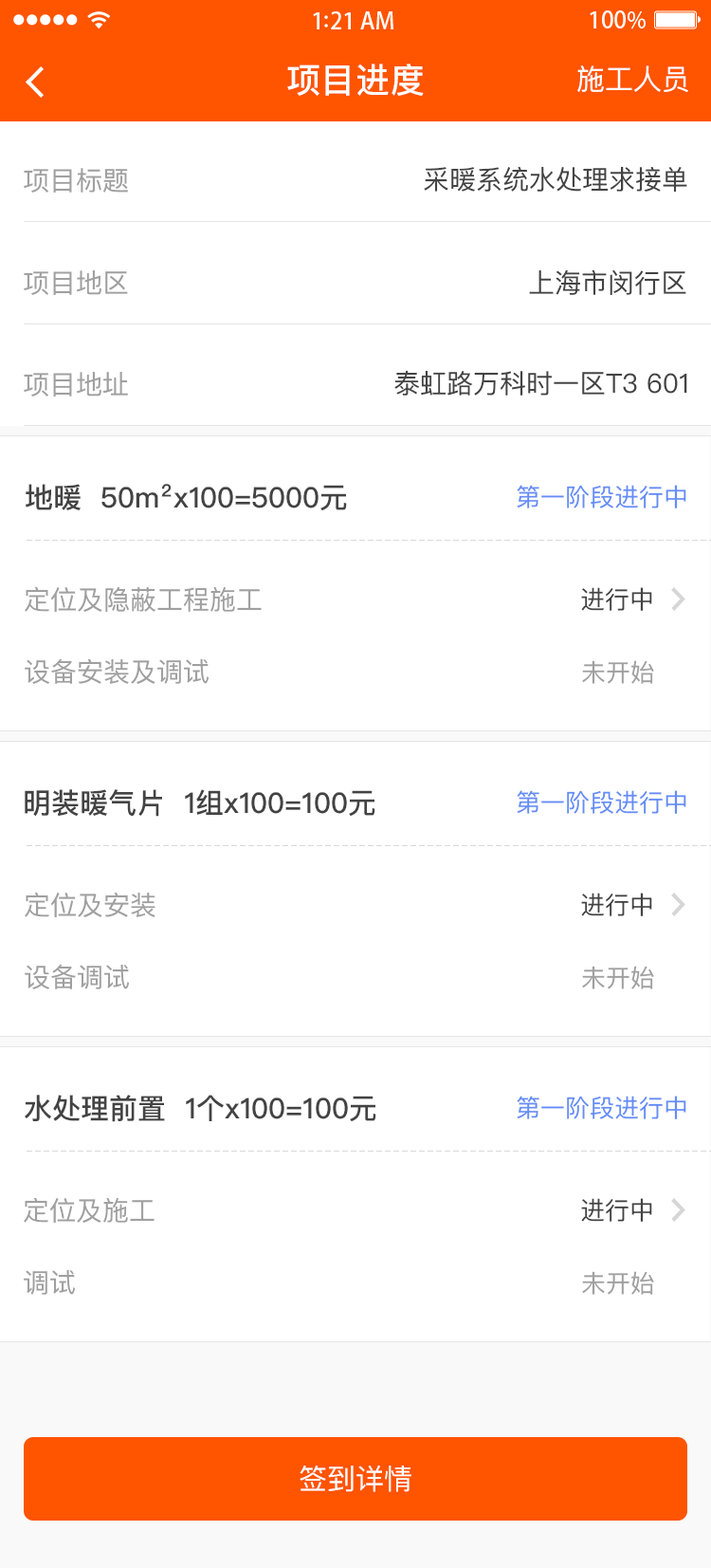
<style>
.page{position:relative;width:711px;height:1568px;background:#ffffff}
.page>*{position:absolute;margin:0}
.t1{font:34.1px "PingFangSC-Medium";letter-spacing:0.02em;color:#ffffff}
.t2{font:28.5px "PingFangSC-Regular";color:#ffffff}
.t3{font:26.6px "PingFangSC-Regular";color:#a0a0a0}
.t4{font:26.6px "PingFangSC-Regular";color:#434343}
.t5{font:28.5px "PingFangSC-Medium";color:#434343}
.t6{font:24.7px "PingFangSC-Regular";color:#648df6}
.t7{font:24.7px "PingFangSC-Regular";color:#434343}
.t8{font:24.7px "PingFangSC-Regular";color:#a0a0a0}
.t9{font:28.5px "PingFangSC-Regular";color:#ffffff;text-transform:uppercase}
</style>
<div class="page">
<p class="t1" style="left:287px;top:64px;width:137px;height:32px">项目进度</p>
<p class="t2" style="left:578px;top:65px;width:111px;height:28px">施工人员</p>
<p class="t3" style="left:24px;top:168px;width:104px;height:25px">项目标题</p>
<p class="t4" style="left:424px;top:166px;width:264px;height:26px">采暖系统水处理求接单</p>
<p class="t4" style="left:529px;top:269px;width:158px;height:26px">上海市闵行区</p>
<p class="t3" style="left:24px;top:270px;width:104px;height:25px">项目地区</p>
<p class="t3" style="left:24px;top:372px;width:104px;height:25px">项目地址</p>
<p class="t4" style="left:395px;top:370px;width:293px;height:26px">泰虹路万科时一区T3 601</p>
<p class="t5" style="left:26px;top:484px;width:321px;height:27px">地暖  50m²x100=5000元</p>
<p class="t6" style="left:517px;top:485px;width:170px;height:23px">第一阶段进行中</p>
<p class="t3" style="left:25px;top:586px;width:237px;height:26px">定位及隐蔽工程施工</p>
<p class="t7" style="left:581px;top:587px;width:72px;height:24px">进行中</p>
<p class="t3" style="left:25px;top:658px;width:185px;height:26px">设备安装及调试</p>
<p class="t8" style="left:582px;top:660px;width:73px;height:24px">未开始</p>
<p class="t5" style="left:25px;top:789px;width:351px;height:28px">明装暖气片  1组x100=100元</p>
<p class="t6" style="left:517px;top:790px;width:170px;height:24px">第一阶段进行中</p>
<p class="t3" style="left:25px;top:892px;width:131px;height:25px">定位及安装</p>
<p class="t7" style="left:581px;top:893px;width:72px;height:23px">进行中</p>
<p class="t3" style="left:25px;top:964px;width:105px;height:25px">设备调试</p>
<p class="t8" style="left:582px;top:966px;width:73px;height:23px">未开始</p>
<p class="t5" style="left:25px;top:1095px;width:352px;height:27px">水处理前置  1个x100=100元</p>
<p class="t6" style="left:517px;top:1096px;width:170px;height:23px">第一阶段进行中</p>
<p class="t3" style="left:24px;top:1197px;width:131px;height:26px">定位及施工</p>
<p class="t7" style="left:581px;top:1198px;width:72px;height:24px">进行中</p>
<p class="t3" style="left:24px;top:1269px;width:52px;height:26px">调试</p>
<p class="t8" style="left:582px;top:1271px;width:73px;height:24px">未开始</p>
<p class="t9" style="left:300px;top:1465px;width:112px;height:27px">签到详情</p>
</div>
